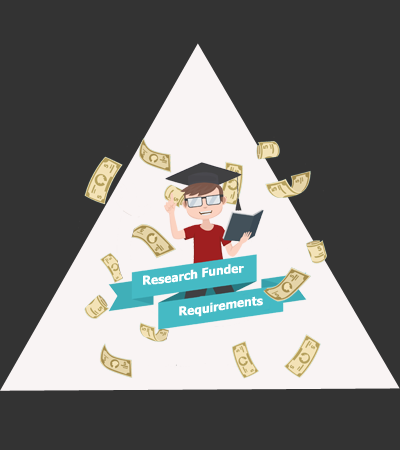
<style>
.page{position:relative;width:400px;height:450px;background:#333333}
.page>*{position:absolute;margin:0}
.t1{font:12px "Tahoma-Bold";color:#ffffff}
</style>
<div class="page">
<p class="t1" style="left:143px;top:264px;width:101px;height:21px">Research Funder</p>
<p class="t1" style="left:179px;top:296px;width:84px;height:21px">Requirements</p>
</div>
